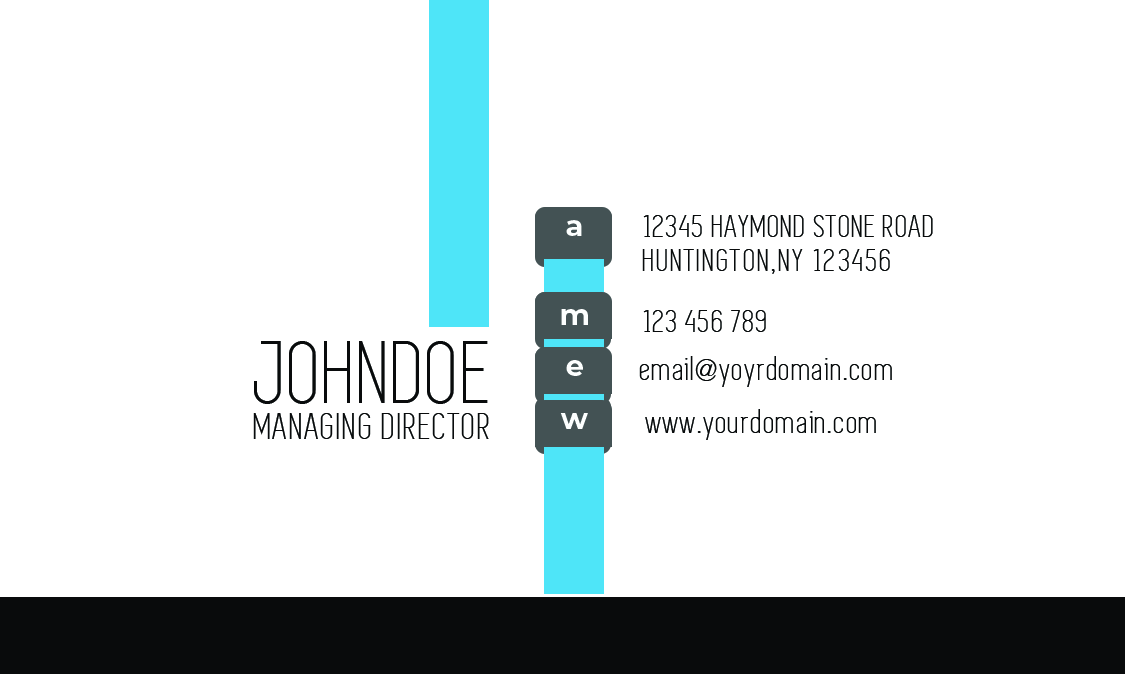
<style>
.page{position:relative;width:1125px;height:675px;background:#ffffff}
.page>*{position:absolute;margin:0}
.t1{font:29.2px "Montserrat-Bold";letter-spacing:0.05em;color:#fdffff}
.t2{font:33.3px "Simplifica";letter-spacing:0.04em;color:#090b0c}
.t3{font:33.3px "Simplifica";letter-spacing:0.07em;color:#090b0c}
.t4{font:91.7px "Simplifica";letter-spacing:0.025em;color:#090b0c}
.t5{font:37.5px "Simplifica";letter-spacing:0.06em;color:#090b0c}
</style>
<div class="page">
<p class="t1" style="left:566px;top:220px;width:16px;height:16px">a</p>
<p class="t2" style="left:643px;top:215px;width:290px;height:22px">12345 HAYMOND STONE ROAD</p>
<p class="t3" style="left:642px;top:249px;width:248px;height:25px">HUNTINGTON,NY 123456</p>
<p class="t1" style="left:561px;top:309px;width:27px;height:16px">m</p>
<p class="t2" style="left:643px;top:310px;width:123px;height:22px">123 456 789</p>
<p class="t4" style="left:254px;top:341px;width:234px;height:63px">JOHNDOE</p>
<p class="t1" style="left:566px;top:360px;width:17px;height:16px">e</p>
<p class="t2" style="left:639px;top:356px;width:253px;height:31px">email@yoyrdomain.com</p>
<p class="t5" style="left:253px;top:413px;width:236px;height:26px">MANAGING DIRECTOR</p>
<p class="t1" style="left:560px;top:413px;width:28px;height:16px">w</p>
<p class="t2" style="left:645px;top:409px;width:231px;height:31px">www.yourdomain.com</p>
</div>
